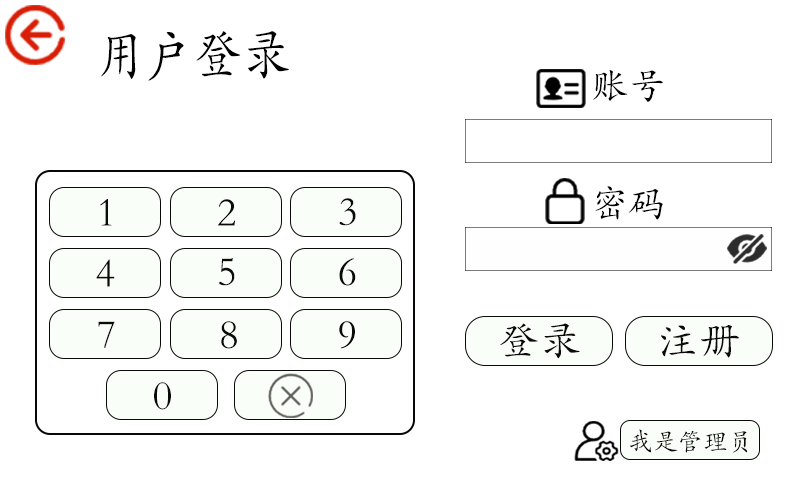
<style>
.page{position:relative;width:800px;height:480px;background:#ffffff}
.page>*{position:absolute;margin:0}
.t1{font:56px "STKaiti";color:#000000;scale:0.86 1}
.t2{font:37.8px "STKaiti";color:#000000}
.t3{font:41.7px "STKaiti";color:#0a0a0a}
.t4{font:40.9px "STKaiti";color:#0a0a0a}
.t5{font:25px "STKaiti";color:#0a0a0a}
</style>
<div class="page">
<p class="t1" style="left:101px;top:31px;width:188px;height:50px">用户登录</p>
<p class="t2" style="left:593px;top:70px;width:70px;height:32px">账号</p>
<p class="t3" style="left:339px;top:198px;width:17px;height:28px">3</p>
<p class="t2" style="left:595px;top:186px;width:68px;height:34px">密码</p>
<p class="t3" style="left:100px;top:199px;width:12px;height:27px">1</p>
<p class="t3" style="left:217px;top:199px;width:18px;height:27px">2</p>
<p class="t3" style="left:96px;top:259px;width:19px;height:28px">4</p>
<p class="t3" style="left:219px;top:258px;width:16px;height:28px">5</p>
<p class="t3" style="left:339px;top:258px;width:17px;height:28px">6</p>
<p class="t3" style="left:98px;top:321px;width:17px;height:27px">7</p>
<p class="t3" style="left:221px;top:321px;width:16px;height:28px">8</p>
<p class="t3" style="left:339px;top:321px;width:16px;height:28px">9</p>
<p class="t4" style="left:500px;top:323px;width:80px;height:36px">登录</p>
<p class="t4" style="left:661px;top:325px;width:78px;height:33px">注册</p>
<p class="t3" style="left:154px;top:382px;width:17px;height:28px">0</p>
<p class="t5" style="left:630px;top:429px;width:118px;height:24px">我是管理员</p>
</div>
